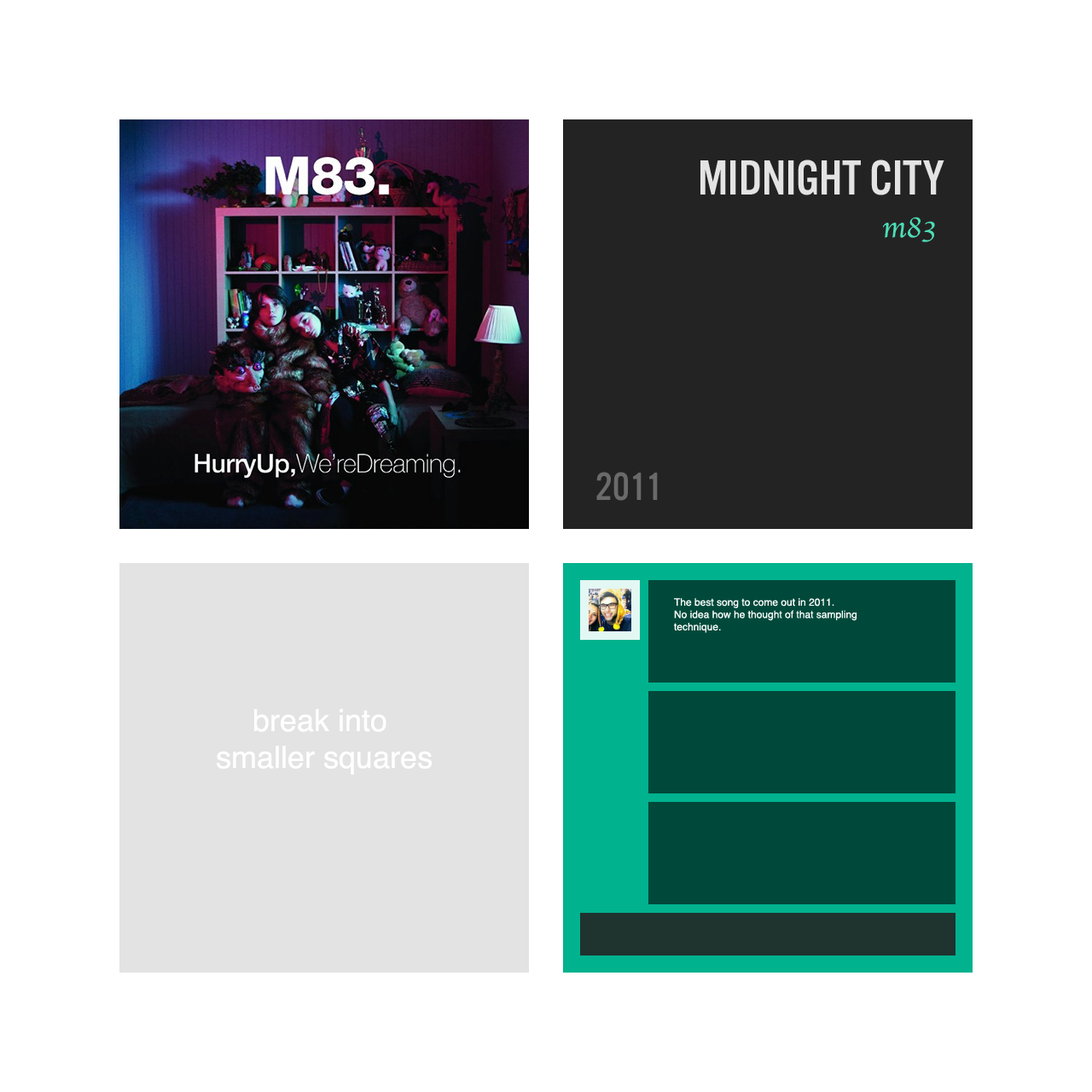
<style>
.page{position:relative;width:1092px;height:1092px;background:#ffffff}
.page>*{position:absolute;margin:0}
.t1{font:51.2px "AlternateGotNo3D";color:#e3e3e3}
.t2{font:30.7px "Apple-Chancery";color:#4ddeb7}
.t3{font:40.9px "AlternateGotNo3D";color:#6a6a6a}
.t4{font:10.2px "Helvetica";color:#ffffff}
.t5{font:30.7px "Helvetica";color:#ffffff}
</style>
<div class="page">
<p class="t1" style="left:700px;top:160px;width:244px;height:35px">MIDNIGHT CITY</p>
<p class="t2" style="left:883px;top:217px;width:52px;height:25px">m83</p>
<p class="t3" style="left:596px;top:472px;width:62px;height:29px">2011</p>
<p class="t4" style="left:674px;top:598px;width:183px;height:35px">The best song to come out in 2011.<br>No idea how he thought of that sampling<br>technique.</p>
<p class="t5" style="left:217px;top:709px;width:215px;height:66px;text-align:center">break into <br>smaller squares</p>
</div>
